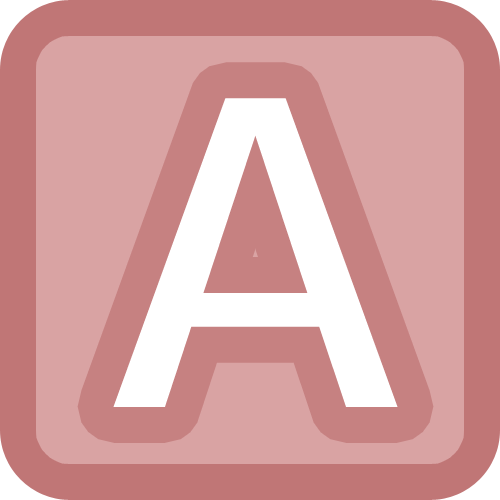
<style>
.page{position:relative;width:500px;height:500px;background:#d9a3a3}
.page>*{position:absolute;margin:0}
.t1{font:423.3px "Menlo-Regular";color:#ffffff;scale:1.18 1}
</style>
<div class="page">
<p class="t1" style="left:113px;top:98px;width:285px;height:309px">A</p>
</div>
